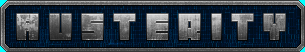
<style>
.page{position:relative;width:305px;height:52px}
.page>*{position:absolute;margin:0}
.t1{font:32.7px "04b19";letter-spacing:0.2em;scale:1.26 1}
</style>
<div class="page">
<p class="t1" style="left:17px;top:14px;width:268px;height:26px">AUSTERITY</p>
</div>
